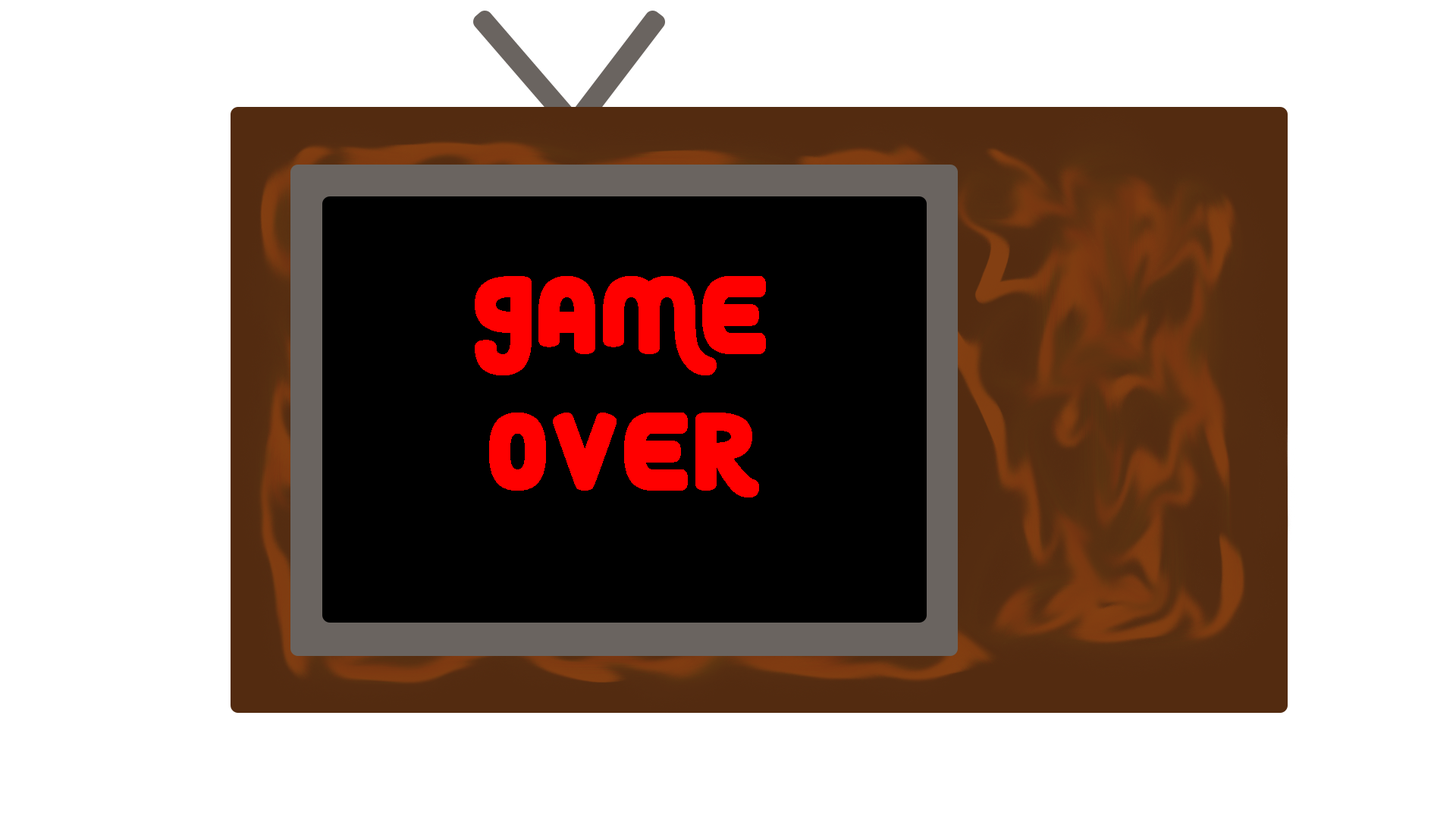
<style>
.page{position:relative;width:1456px;height:819px;background:#ffffff}
.page>*{position:absolute;margin:0}
.t1{font:113.7px "RoundyRainbows";color:#ff0000}
.t2{font:28.4px "RoundyRainbows";color:#ffffff}
</style>
<div class="page">
<p class="t1" style="left:475px;top:276px;width:291px;height:221px;text-align:center"><span class="t2"><br></span>Game <br>over</p>
</div>
